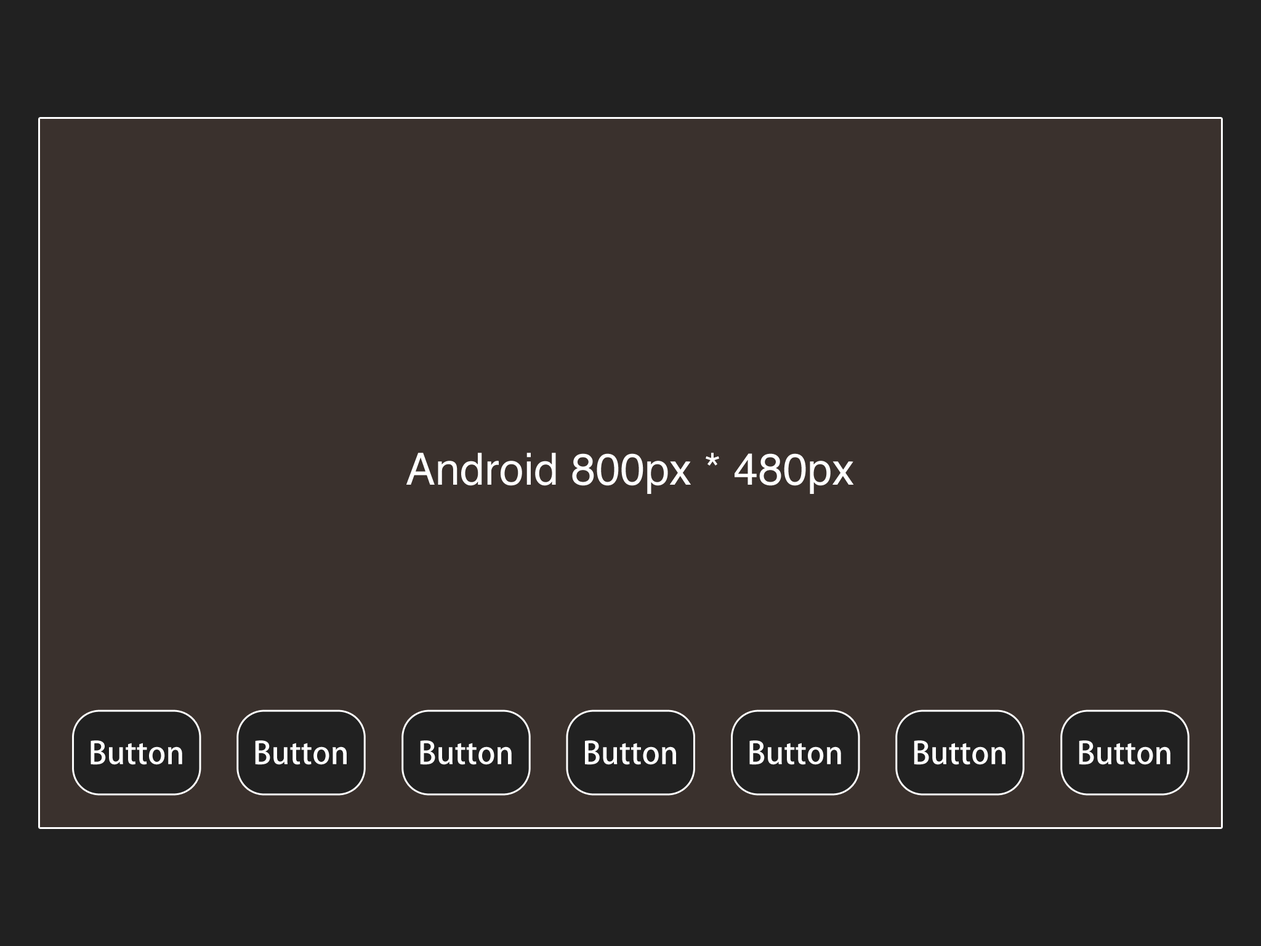
<style>
.page{position:relative;width:1261px;height:946px;background:#3a312d}
.page>*{position:absolute;margin:0}
.t1{font:44.3px "Helvetica";color:#ffffff}
.t2{font:30.7px "AdobeHeitiStd-Regular";color:#ffffff}
</style>
<div class="page">
<p class="t1" style="left:406px;top:453px;width:448px;height:41px">Android 800px * 480px</p>
<p class="t2" style="left:91px;top:740px;width:91px;height:25px">Button</p>
<p class="t2" style="left:255px;top:740px;width:92px;height:25px">Button</p>
<p class="t2" style="left:420px;top:740px;width:92px;height:25px">Button</p>
<p class="t2" style="left:585px;top:740px;width:91px;height:25px">Button</p>
<p class="t2" style="left:749px;top:740px;width:92px;height:25px">Button</p>
<p class="t2" style="left:914px;top:740px;width:91px;height:25px">Button</p>
<p class="t2" style="left:1079px;top:740px;width:91px;height:25px">Button</p>
</div>
